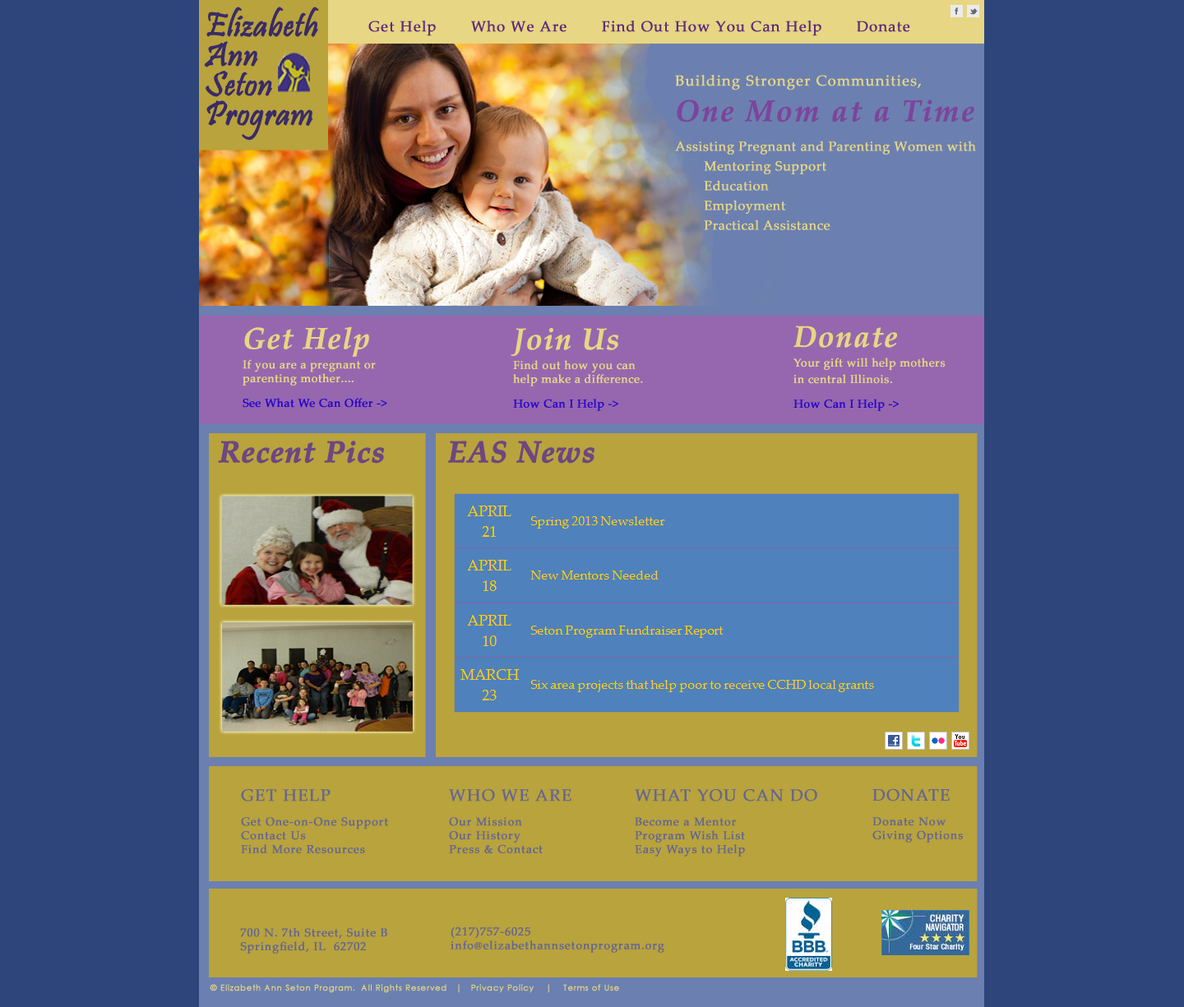
<style>
.page{position:relative;width:1184px;height:1007px;background:#2e457b}
.page>*{position:absolute;margin:0}
.t1{font:14.8px "PalatinoLinotype-Roman";letter-spacing:0.05em;color:#5f2b7b;font-weight:bold}
.t2{font:13.2px/19.7px "PalatinoLinotype-Roman";letter-spacing:0.02em;color:#e7d683;font-weight:bold}
.t3{font:14.8px "PalatinoLinotype-Roman";letter-spacing:0.05em;color:#e7d683;font-weight:bold}
.t4{font:29.6px "PalatinoLinotype-BoldItalic";letter-spacing:0.05em;color:#7d449c;font-weight:bold}
.t5{font:13.2px/29.6px "PalatinoLinotype-Roman";letter-spacing:0.02em;color:#e7d683;font-weight:bold}
.t6{font:11.5px/19.7px "PalatinoLinotype-Roman";letter-spacing:0.02em;color:#e7d683;font-weight:bold}
.t7{font:29.6px "PalatinoLinotype-BoldItalic";letter-spacing:0.02em;color:#e7d683;font-weight:bold}
.t8{font:11.5px "PalatinoLinotype-Roman";letter-spacing:0.02em;color:#e7d683;font-weight:bold}
.t9{font:11.5px/24.7px "PalatinoLinotype-Roman";letter-spacing:0.02em;color:#2906ca;font-weight:bold}
.t10{font:11.5px/16.4px "PalatinoLinotype-Roman";letter-spacing:0.02em;color:#e7d683;font-weight:bold}
.t11{font:29.6px "PalatinoLinotype-BoldItalic";letter-spacing:0.02em;color:#6d4682;font-weight:bold}
.t12{font:11.5px "PalatinoLinotype-Roman";letter-spacing:0.05em;color:#666690;font-weight:bold}
.t13{font:16.4px/39.5px "PalatinoLinotype-Roman";letter-spacing:0.05em;color:#666690;font-weight:bold}
.t14{font:11.5px/24.7px "PalatinoLinotype-Roman";letter-spacing:0.05em;color:#666690;font-weight:bold}
.t15{font:11.5px "CenturyGothic";letter-spacing:0.05em;color:#666690;font-weight:bold}
.t16{font:8.2px "CenturyGothic";letter-spacing:0.05em;color:#e7d683;font-weight:bold}
</style>
<div class="page">
<p class="t1" style="left:368px;top:21px;width:542px;height:15px">Get Help       Who We Are       Find Out How You Can Help       Donate</p>
<p class="t2" style="left:675px;top:75px;width:301px;height:155px"><span class="t3">Building Stronger Communities,<br></span><span class="t4">One Mom at a Time<br></span><span class="t5">Assisting Pregnant and Parenting Women with<br></span>Mentoring Support<br>Education<br>Employment<br>Practical Assistance</p>
<p class="t6" style="left:243px;top:326px;width:144px;height:82px"><span class="t7">Get Help<br></span>If you are a pregnant or<br><span class="t8">parenting mother....<br></span><span class="t9">See What We Can Offer -&gt;</span></p>
<p class="t8" style="left:511px;top:328px;width:132px;height:83px"><span class="t7">Join Us<br></span><span class="t6">Find out how you can<br></span>help make a difference.<br><span class="t9">How Can I Help -&gt;</span></p>
<p class="t6" style="left:793px;top:326px;width:153px;height:85px"><span class="t7">Donate<br></span>Your gift will help mothers<br><span class="t10">in central Illinois.<br></span><span class="t9">How Can I Help -&gt;</span></p>
<p class="t11" style="left:218px;top:441px;width:166px;height:23px">Recent Pics</p>
<p class="t11" style="left:448px;top:441px;width:146px;height:23px">EAS News</p>
<p class="t12" style="left:241px;top:789px;width:147px;height:64px"><span class="t13">GET HELP<br></span><span class="t14">Get One-on-One Support<br></span>Contact Us<br>Find More Resources</p>
<p class="t12" style="left:449px;top:789px;width:122px;height:64px"><span class="t13">WHO WE ARE<br></span><span class="t14">Our Mission<br></span>Our History<br>Press &amp; Contact</p>
<p class="t12" style="left:635px;top:789px;width:182px;height:68px"><span class="t13">WHAT YOU CAN DO<br></span><span class="t14">Become a Mentor<br></span>Program Wish List<br>Easy Ways to Help</p>
<p class="t12" style="left:872px;top:788px;width:91px;height:55px"><span class="t13">DONATE<br></span><span class="t14">Donate Now<br></span>Giving Options</p>
<p class="t12" style="left:240px;top:927px;width:147px;height:27px"><span class="t15"><br></span>700 N. 7th Street, Suite B<br>Springfield, IL  62702</p>
<p class="t12" style="left:451px;top:927px;width:213px;height:26px"><span class="t15"><br></span>(217)757-6025<br>info@elizabethannsetonprogram.org</p>
<p class="t16" style="left:210px;top:984px;width:409px;height:9px">© Elizabeth Ann Seton Program.  All Rights Reserved   |   Privacy Policy    |    Terms of Use</p>
</div>
